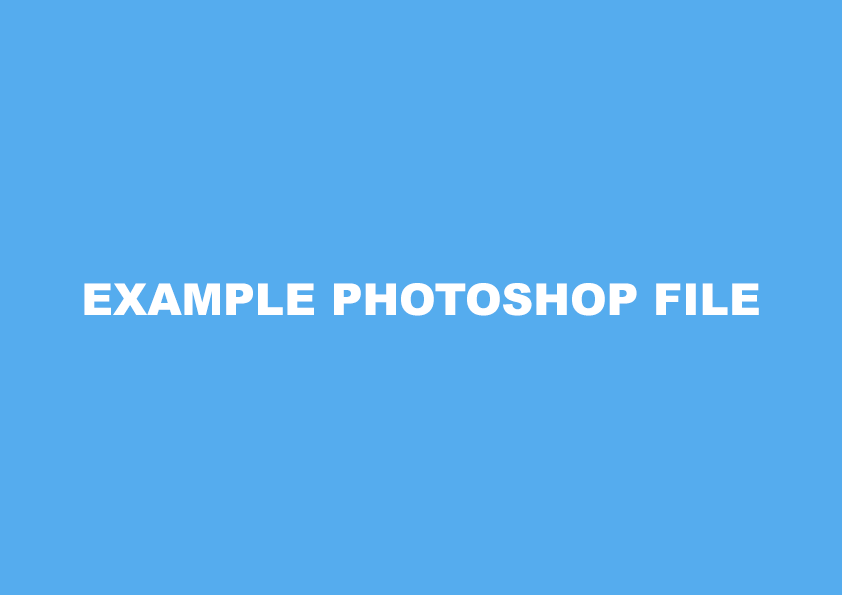
<style>
.page{position:relative;width:842px;height:595px;background:#55acee}
.page>*{position:absolute;margin:0}
.t1{font:44px "Arial-Black";color:#ffffff}
</style>
<div class="page">
<p class="t1" style="left:84px;top:283px;width:675px;height:33px">EXAMPLE PHOTOSHOP FILE</p>
</div>
